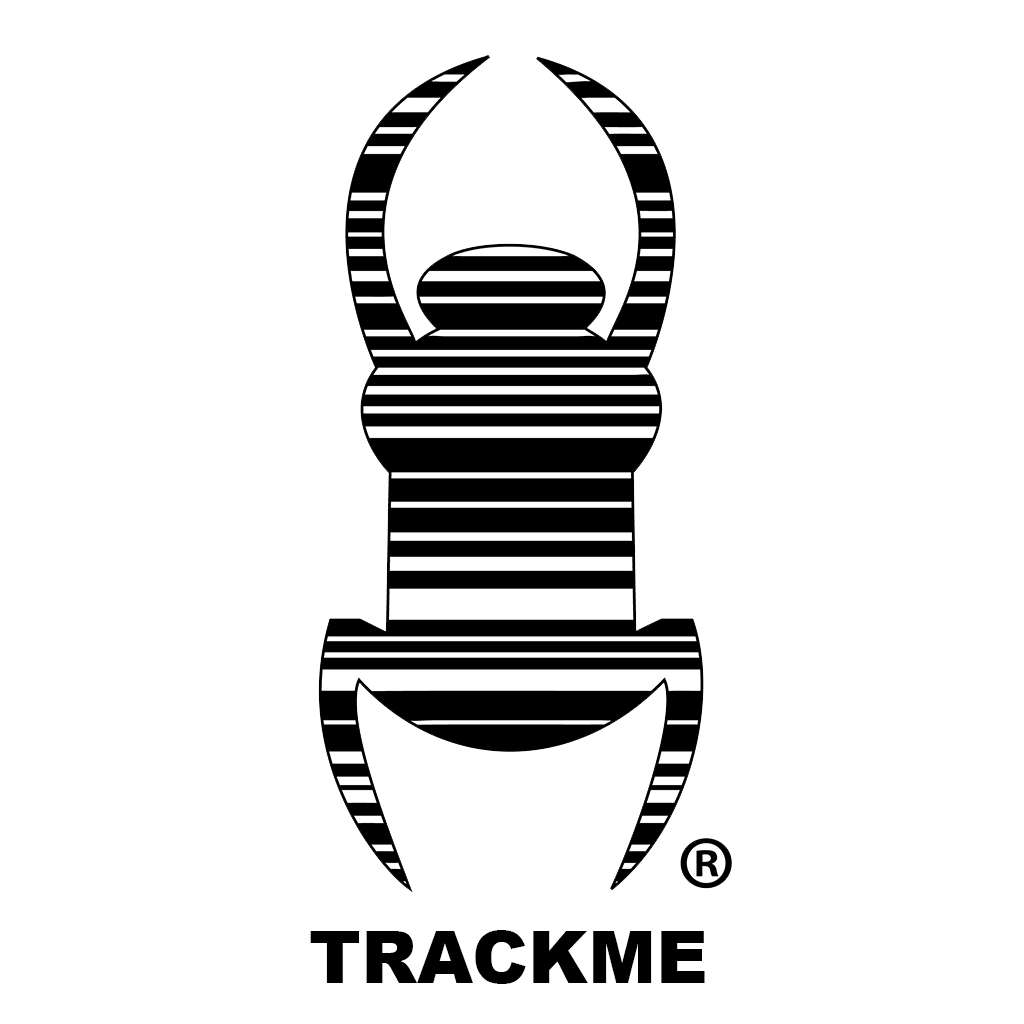
<style>
.page{position:relative;width:1024px;height:1024px;background:#ffffff}
.page>*{position:absolute;margin:0}
.t1{font:72px "Arial-Black";color:#000000}
</style>
<div class="page">
<p class="t1" style="left:310px;top:930px;width:395px;height:54px">TRACKME</p>
</div>
